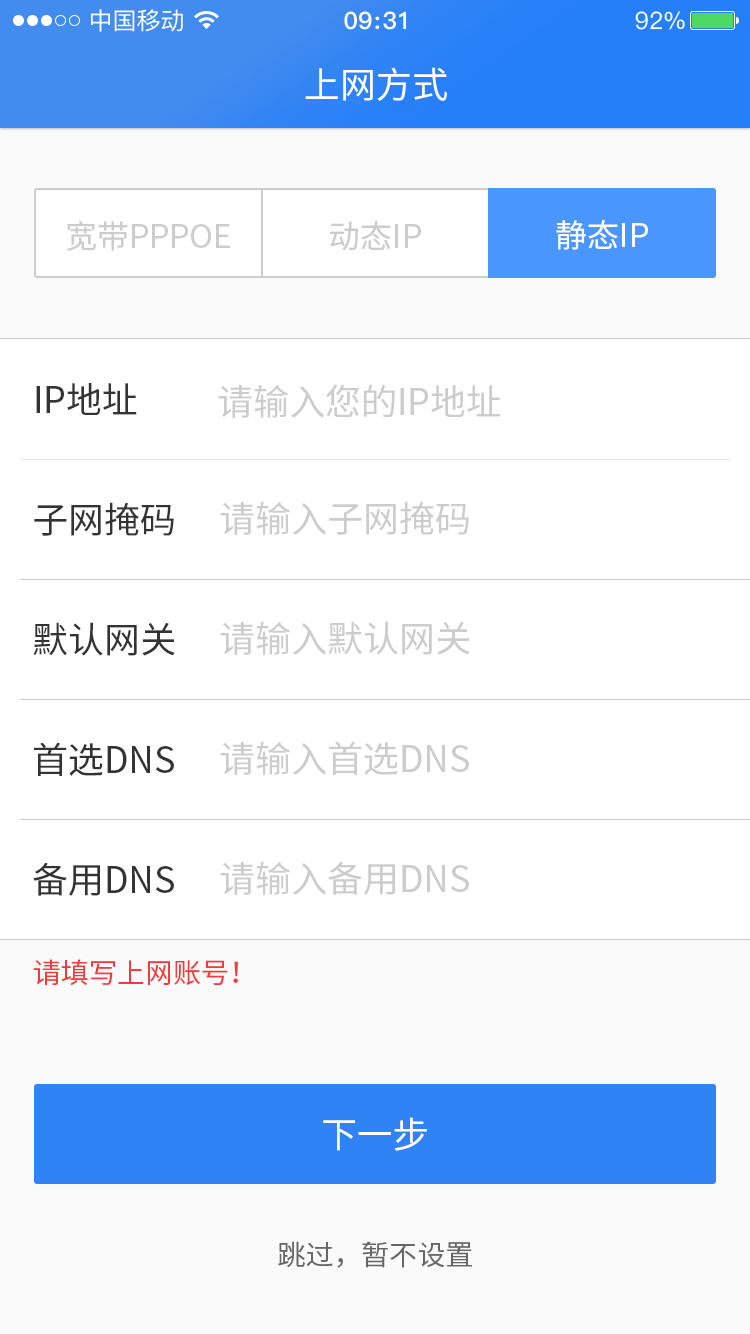
<style>
.page{position:relative;width:750px;height:1334px;background:#ffffff}
.page>*{position:absolute;margin:0}
.t1{font:36px "SourceHanSansCN-Regular";color:#ffffff}
.t2{font:32px "SourceHanSansCN-Regular";color:#cccccc}
.t3{font:32px "SourceHanSansCN-Regular";color:#fefeff}
.t4{font:36px "SourceHanSansCN-Regular";color:#333333}
.t5{font:36px "SourceHanSansCN-Regular";color:#cccccc}
.t6{font:28px "SourceHanSansCN-Regular";color:#f23b3a}
.t7{font:28px "SourceHanSansCN-Regular";color:#666666}
</style>
<div class="page">
<p class="t1" style="left:305px;top:67px;width:142px;height:34px">上网方式</p>
<p class="t2" style="left:66px;top:221px;width:164px;height:30px">宽带PPPOE</p>
<p class="t2" style="left:330px;top:220px;width:91px;height:31px">动态IP</p>
<p class="t3" style="left:556px;top:219px;width:92px;height:31px">静态IP</p>
<p class="t4" style="left:36px;top:383px;width:101px;height:32px">IP地址</p>
<p class="t5" style="left:218px;top:384px;width:283px;height:34px">请输入您的IP地址</p>
<p class="t4" style="left:34px;top:502px;width:140px;height:34px">子网掩码</p>
<p class="t5" style="left:220px;top:501px;width:249px;height:34px">请输入子网掩码</p>
<p class="t4" style="left:33px;top:622px;width:142px;height:34px">默认网关</p>
<p class="t5" style="left:220px;top:621px;width:250px;height:34px">请输入默认网关</p>
<p class="t4" style="left:34px;top:742px;width:140px;height:34px">首选DNS</p>
<p class="t5" style="left:220px;top:741px;width:249px;height:34px">请输入首选DNS</p>
<p class="t4" style="left:33px;top:862px;width:141px;height:34px">备用DNS</p>
<p class="t5" style="left:220px;top:861px;width:249px;height:34px">请输入备用DNS</p>
<p class="t6" style="left:33px;top:959px;width:205px;height:27px">请填写上网账号！</p>
<p class="t1" style="left:323px;top:1117px;width:104px;height:34px">下一步</p>
<p class="t7" style="left:278px;top:1241px;width:194px;height:27px">跳过，暂不设置</p>
</div>
